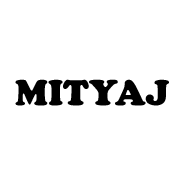
<style>
.page{position:relative;width:184px;height:184px;background:#ffffff}
.page>*{position:absolute;margin:0}
.t1{font:37px "CooperBlack";color:#000000}
</style>
<div class="page">
<p class="t1" style="left:15px;top:79px;width:154px;height:27px">MITYAJ</p>
</div>
